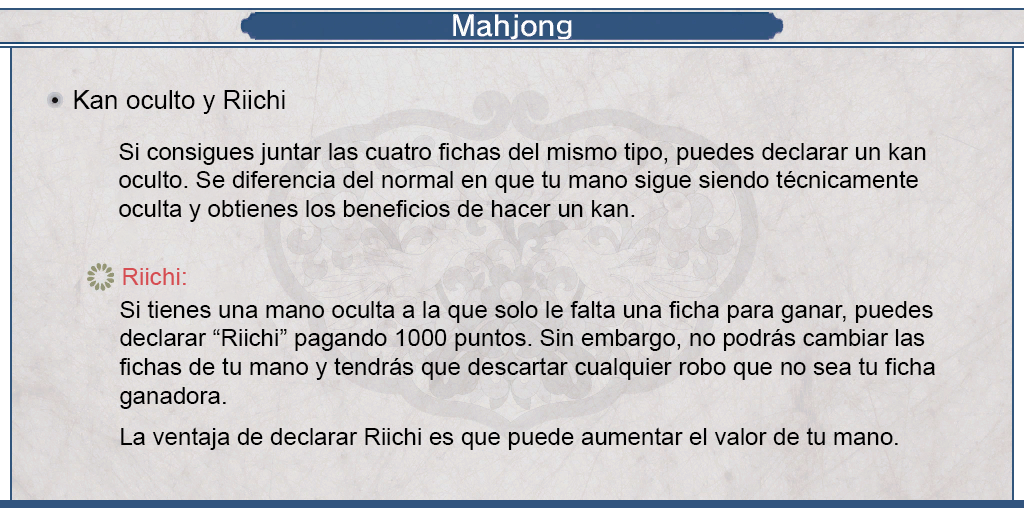
<style>
.page{position:relative;width:1024px;height:512px}
.page>*{position:absolute;margin:0}
.t1{font:26px "ArialMT";color:#000000}
.t2{font:24px "ArialMT";color:#000000}
.t3{font:24px "ArialMT";color:#d64d52}
</style>
<div class="page">
<p class="t1" style="left:74px;top:90px;width:211px;height:24px">Kan oculto y Riichi</p>
<p class="t2" style="left:119px;top:142px;width:807px;height:80px;text-align:justify">Si consigues juntar las cuatro fichas del mismo tipo, puedes declarar un kan<br>oculto. Se diferencia del normal en que tu mano sigue siendo técnicamente <br>oculta y obtienes los beneficios de hacer un kan.</p>
<p class="t3" style="left:123px;top:268px;width:63px;height:17px">Riichi:</p>
<p class="t2" style="left:119px;top:300px;width:816px;height:150px;text-align:justify">Si tienes una mano oculta a la que solo le falta una ficha para ganar, puedes<br>declarar “Riichi” pagando 1000 puntos. Sin embargo, no podrás cambiar las<br>fichas de tu mano y tendrás que descartar cualquier robo que no sea tu ficha<br>ganadora.<br><br>La ventaja de declarar Riichi es que puede aumentar el valor de tu mano.</p>
</div>
